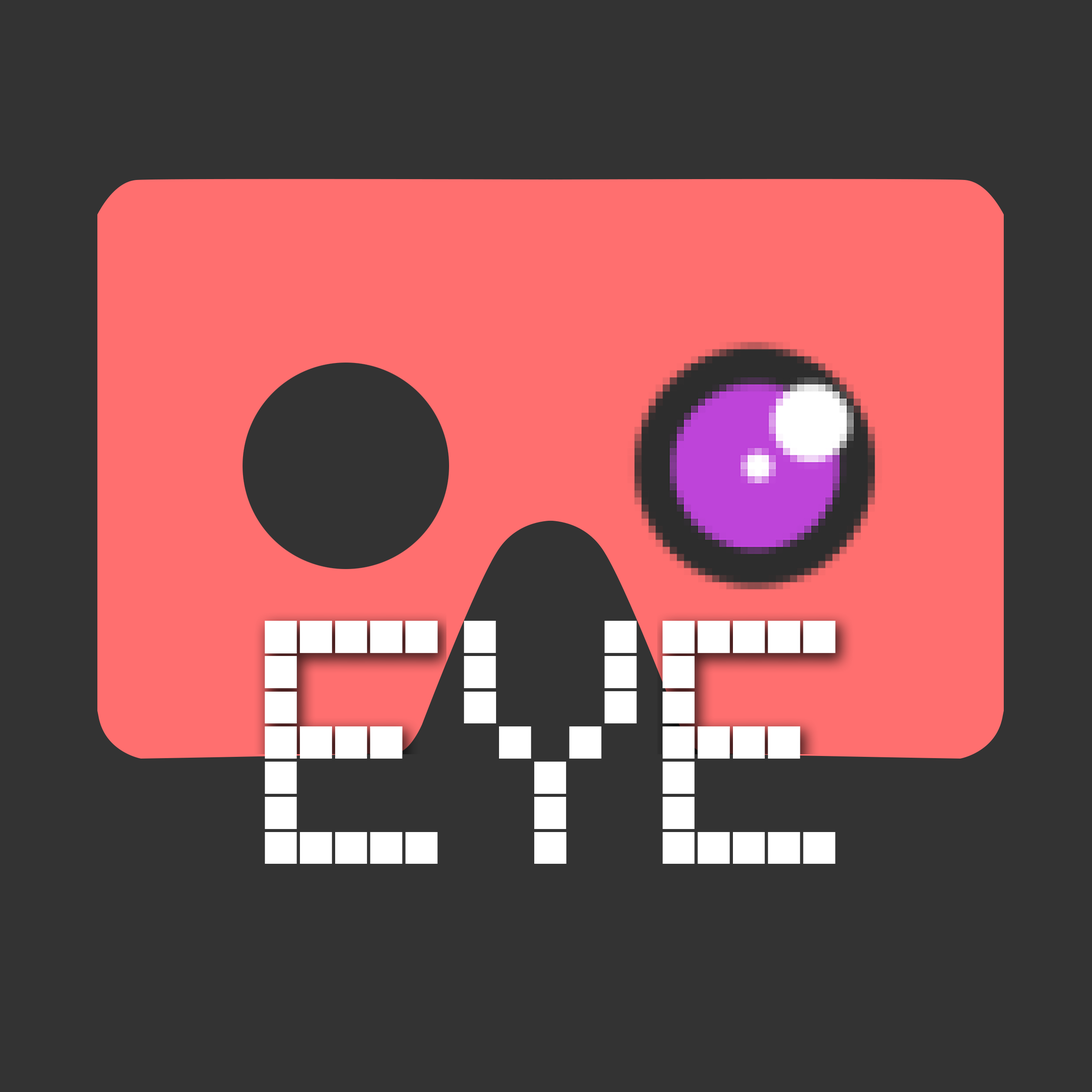
<style>
.page{position:relative;width:1092px;height:1092px;background:#333333}
.page>*{position:absolute;margin:0}
.t1{font:324.7px "ElectronicHighwaySign";color:#ffffff}
</style>
<div class="page">
<p class="t1" style="left:265px;top:621px;width:571px;height:243px">eye</p>
</div>
